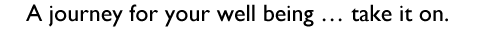
<style>
.page{position:relative;width:504px;height:29px;background:#ffffff}
.page>*{position:absolute;margin:0}
.t1{font:24px "GillSans";color:#000000}
</style>
<div class="page">
<p class="t1" style="left:26px;top:4px;width:422px;height:23px">A journey for your well being … take it on.</p>
</div>
